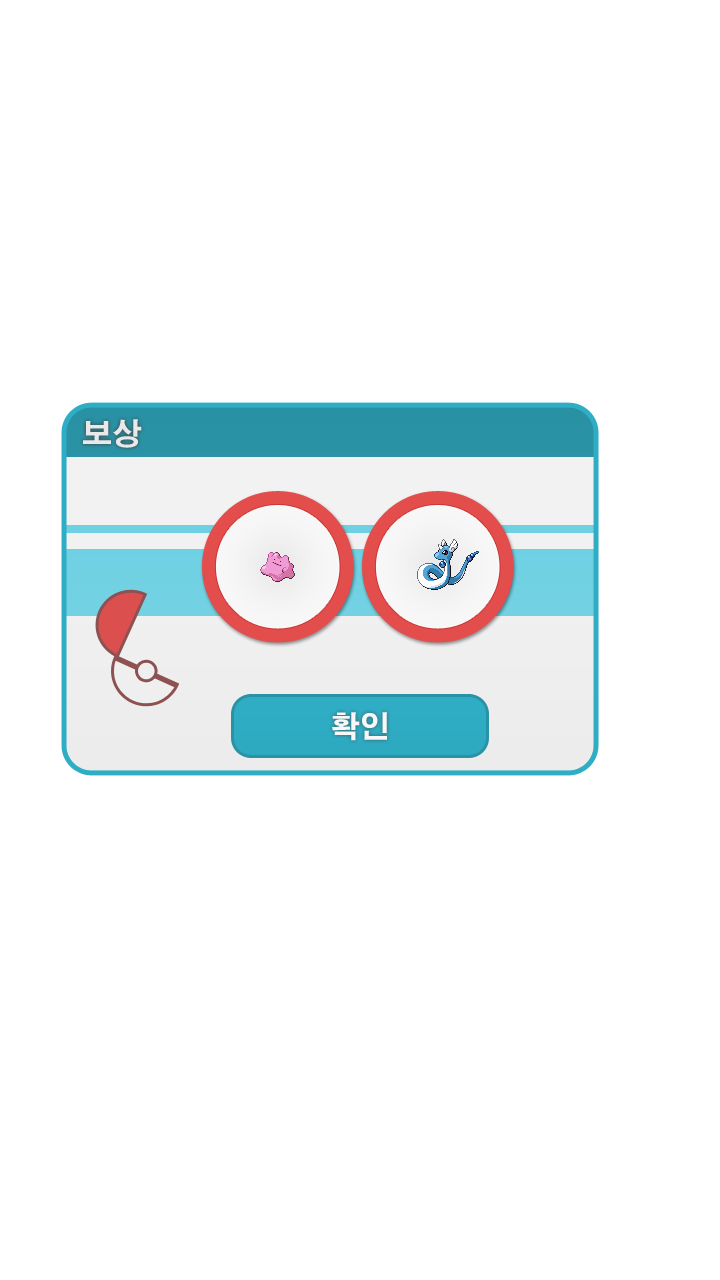
<style>
.page{position:relative;width:720px;height:1280px;background:#ffffff}
.page>*{position:absolute;margin:0}
.t1{font:30px "H2gtrE";color:#e9e9e9}
.t2{font:30px "H2gtrE";color:#f7f7f7}
</style>
<div class="page">
<p class="t1" style="left:83px;top:419px;width:59px;height:29px">보상</p>
<p class="t2" style="left:332px;top:712px;width:55px;height:29px">확인</p>
</div>
